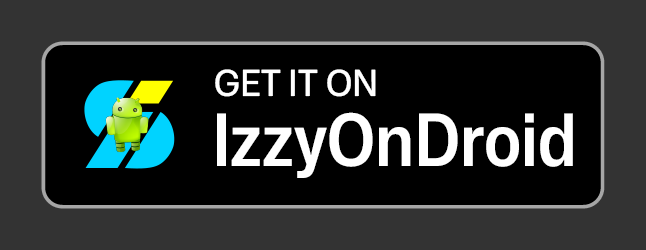
<style>
.page{position:relative;width:646px;height:250px;background:#000000}
.page>*{position:absolute;margin:0}
.t1{font:36px "MonaSans_95.000wdth_500.000wght";color:#ffffff}
.t2{font:72px "MonaSans_90.000wdth_600.000wght";color:#ffffff}
</style>
<div class="page">
<p class="t1" style="left:215px;top:69px;width:161px;height:28px">GET IT ON</p>
<p class="t2" style="left:217px;top:112px;width:356px;height:66px">IzzyOnDroid</p>
</div>
